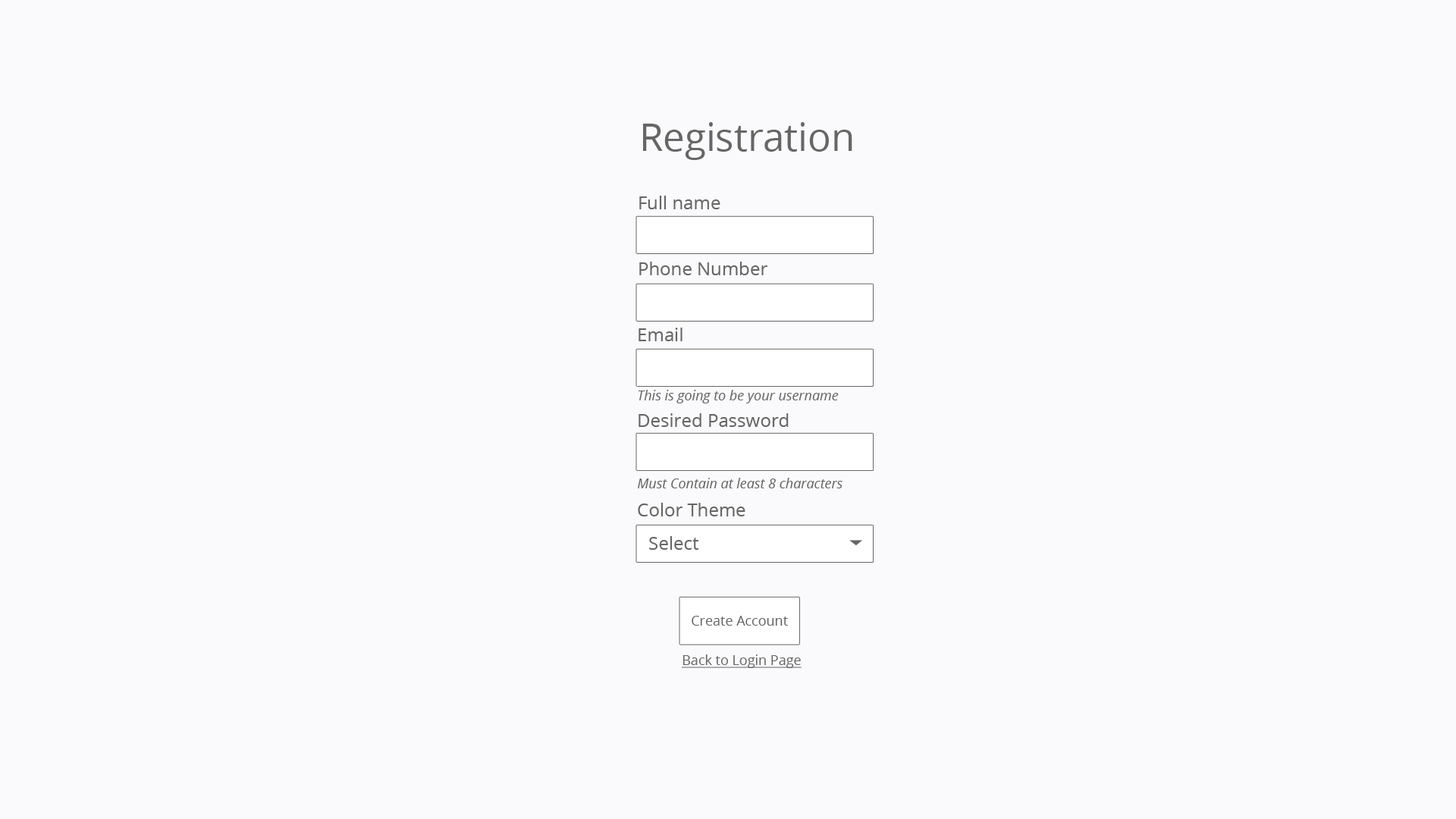
<style>
.page{position:relative;width:1456px;height:819px;background:#faf9fb}
.page>*{position:absolute;margin:0}
.t1{font:38.4px "OpenSans";color:#666666}
.t2{font:18.2px "OpenSans";color:#666666}
.t3{font:13.6px "OpenSans-Italic";color:#666666}
.t4{font:13.6px "OpenSans";color:#666666}
.t5{font:13.6px "OpenSans";color:#666666;text-decoration:underline}
</style>
<div class="page">
<p class="t1" style="left:643px;top:122px;width:209px;height:38px">Registration</p>
<p class="t2" style="left:639px;top:196px;width:81px;height:13px">Full name</p>
<p class="t2" style="left:639px;top:262px;width:128px;height:13px">Phone Number</p>
<p class="t2" style="left:639px;top:328px;width:43px;height:13px">Email</p>
<p class="t3" style="left:639px;top:390px;width:200px;height:13px">This is going to be your username</p>
<p class="t2" style="left:639px;top:413px;width:150px;height:14px">Desired Password</p>
<p class="t3" style="left:638px;top:478px;width:204px;height:10px">Must Contain at least 8 characters</p>
<p class="t2" style="left:638px;top:503px;width:107px;height:13px">Color Theme</p>
<p class="t2" style="left:649px;top:536px;width:50px;height:14px">Select</p>
<p class="t4" style="left:692px;top:616px;width:96px;height:10px">Create Account</p>
<p class="t5" style="left:682px;top:654px;width:120px;height:14px">Back to Login Page</p>
</div>
